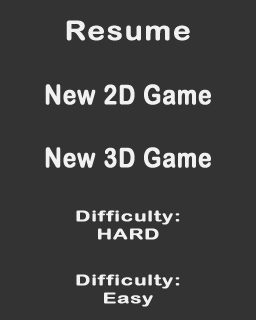
<style>
.page{position:relative;width:256px;height:320px;background:#333333}
.page>*{position:absolute;margin:0}
.t1{font:27px "ArialRoundedMTBold";letter-spacing:0.025em;color:#f1f1f1;font-weight:bold;scale:1.12 1}
.t2{font:27px "ArialRoundedMTBold";letter-spacing:0.025em;color:#f1f1f1;font-weight:bold;scale:0.84 1}
.t3{font:15px "ArialRoundedMTBold";letter-spacing:0.025em;color:#f1f1f1;font-weight:bold;scale:1.35 1}
</style>
<div class="page">
<p class="t1" style="left:66px;top:20px;width:124px;height:21px">Resume</p>
<p class="t2" style="left:45px;top:84px;width:166px;height:21px">New 2D Game</p>
<p class="t2" style="left:45px;top:147px;width:166px;height:21px">New 3D Game</p>
<p class="t3" style="left:76px;top:210px;width:104px;height:30px;text-align:center">Difficulty:<br>HARD</p>
<p class="t3" style="left:76px;top:274px;width:104px;height:33px;text-align:center">Difficulty:<br>Easy</p>
</div>
